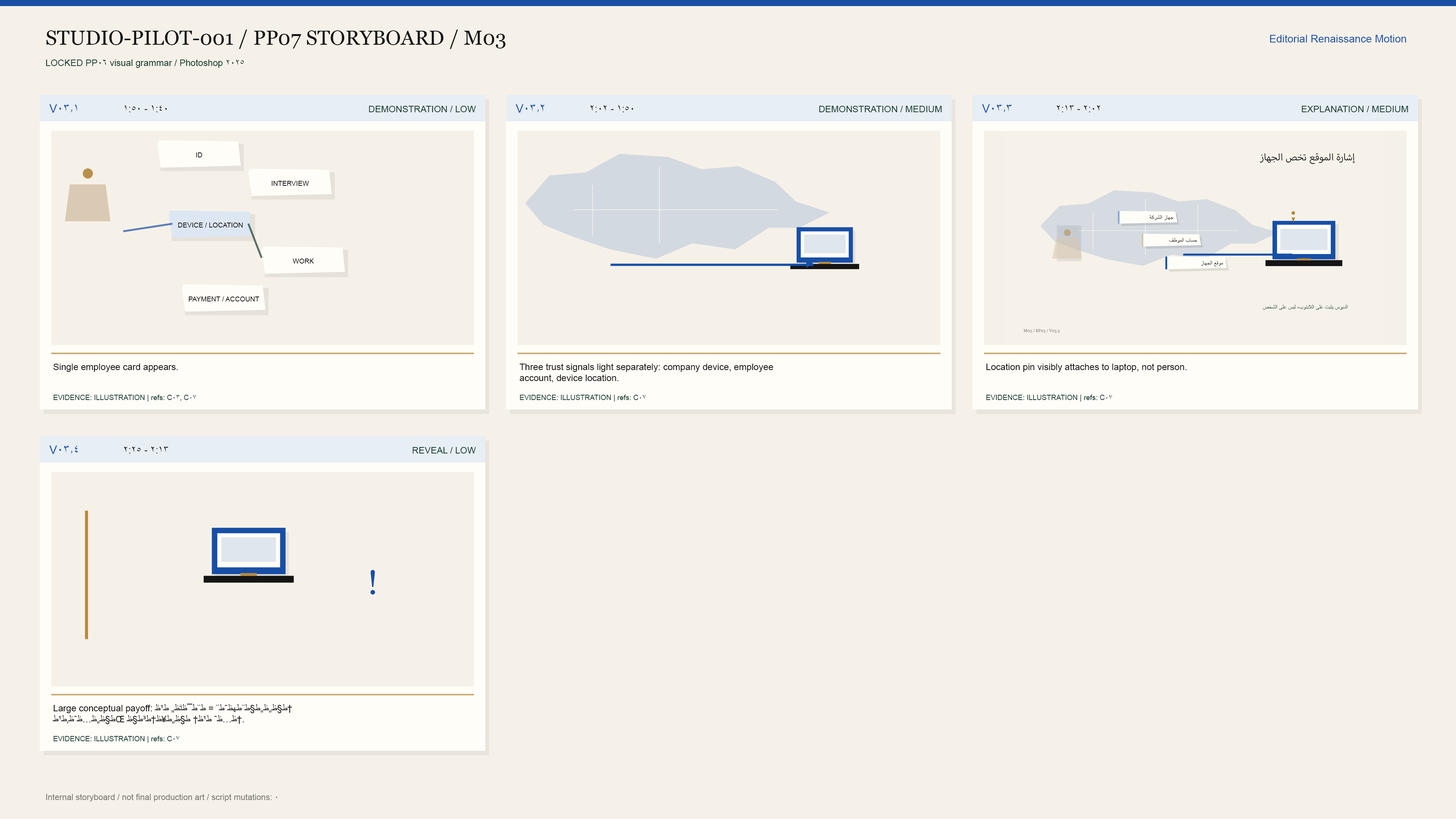
<style>
.page{position:relative;width:1456px;height:819px;background:#f6f1e8}
.page>*{position:absolute;margin:0}
.t1{font:20.5px "Georgia";color:#151515}
.t2{font:10.6px "ArialMT";color:#174fa6}
.t3{font:9.1px "ArialMT";color:#173c32}
.t4{font:11.8px "ArialMT";color:#174fa6}
.t5{font:9.9px "ArialMT";color:#151515}
.t6{font:6.8px "ArialMT";color:#151515}
.t7{font:23.3px "ArialMT";color:#b58a3e}
.t8{font:9.1px "ArialMT";color:#151515}
.t9{font:7.2px "ArialMT";color:#173c32}
.t10{font:34.1px "Georgia";color:#174fa6}
.t11{font:8.3px "ArialMT";color:#7b7974}
</style>
<div class="page">
<p class="t1" style="left:46px;top:30px;width:459px;height:19px">STUDIO-PILOT-001 / PP07 STORYBOARD / M03</p>
<p class="t2" style="left:1270px;top:35px;width:136px;height:7px">Editorial Renaissance Motion</p>
<p class="t3" style="left:46px;top:59px;width:198px;height:9px">LOCKED PP06 visual grammar / Photoshop 2025</p>
<p class="t4" style="left:49px;top:104px;width:28px;height:9px">V03.1</p>
<p class="t5" style="left:124px;top:105px;width:43px;height:7px">1:40 - 1:50</p>
<p class="t3" style="left:369px;top:106px;width:107px;height:6px">DEMONSTRATION / LOW</p>
<p class="t4" style="left:516px;top:104px;width:28px;height:9px">V03.2</p>
<p class="t5" style="left:590px;top:105px;width:43px;height:7px">1:50 - 2:02</p>
<p class="t3" style="left:819px;top:106px;width:123px;height:6px">DEMONSTRATION / MEDIUM</p>
<p class="t4" style="left:982px;top:104px;width:30px;height:9px">V03.3</p>
<p class="t5" style="left:1057px;top:105px;width:43px;height:7px">2:02 - 2:13</p>
<p class="t3" style="left:1302px;top:106px;width:106px;height:6px">EXPLANATION / MEDIUM</p>
<p class="t6" style="left:196px;top:152px;width:6px;height:5px">ID</p>
<p class="t7" style="left:83px;top:168px;width:10px;height:11px;opacity:0.95">●</p>
<p class="t6" style="left:271px;top:181px;width:38px;height:5px">INTERVIEW</p>
<p class="t6" style="left:178px;top:223px;width:65px;height:4px">DEVICE / LOCATION</p>
<p class="t6" style="left:293px;top:259px;width:21px;height:5px">WORK</p>
<p class="t6" style="left:189px;top:297px;width:70px;height:4px">PAYMENT / ACCOUNT</p>
<p class="t8" style="left:53px;top:364px;width:125px;height:8px">Single employee card appears.</p>
<p class="t8" style="left:519px;top:363px;width:254px;height:20px">Three trust signals light separately: company device, employee<br>account, device location.</p>
<p class="t8" style="left:986px;top:363px;width:201px;height:9px">Location pin visibly attaches to laptop, not person.</p>
<p class="t9" style="left:53px;top:395px;width:143px;height:7px">EVIDENCE: ILLUSTRATION | refs: C03, C07</p>
<p class="t9" style="left:520px;top:395px;width:126px;height:7px">EVIDENCE: ILLUSTRATION | refs: C07</p>
<p class="t9" style="left:986px;top:395px;width:126px;height:7px">EVIDENCE: ILLUSTRATION | refs: C07</p>
<p class="t4" style="left:49px;top:446px;width:29px;height:8px">V03.4</p>
<p class="t5" style="left:124px;top:446px;width:44px;height:7px">2:13 - 2:25</p>
<p class="t3" style="left:413px;top:447px;width:63px;height:6px">REVEAL / LOW</p>
<p class="t10" style="left:370px;top:570px;width:5px;height:25px">!</p>
<p class="t8" style="left:53px;top:704px;width:239px;height:20px">Large conceptual payoff: ط§ظ„ظ„ط§ط¨طھظˆط¨ = ط¨ط¯ظٹظ„ ط¹ظ†<br>ط§ظ„ظ…ظˆظ‚ط¹طŒ ظ…ظˆ ط¹ظ† ط§ظ„ط¥ظ†ط³ط§ظ†.</p>
<p class="t9" style="left:53px;top:736px;width:126px;height:7px">EVIDENCE: ILLUSTRATION | refs: C07</p>
<p class="t11" style="left:46px;top:794px;width:232px;height:8px">Internal storyboard / not final production art / script mutations: 0</p>
</div>
